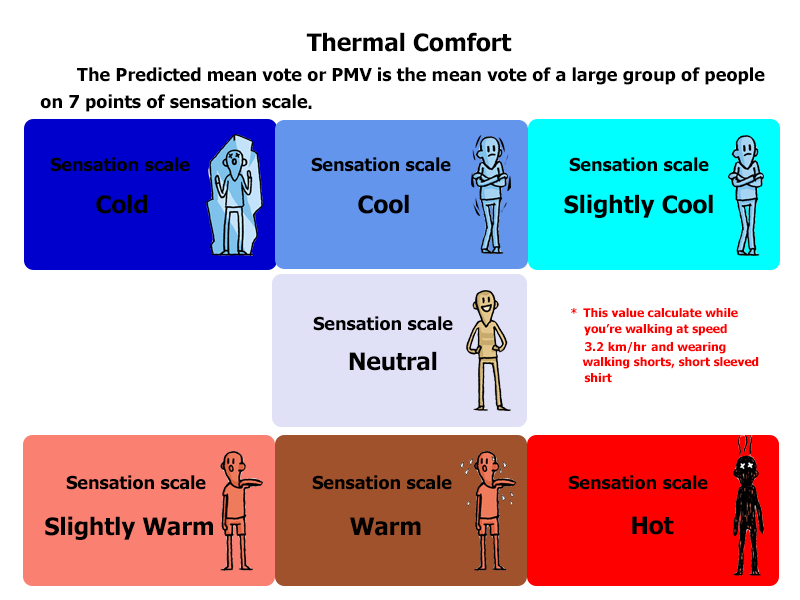
<style>
.page{position:relative;width:800px;height:600px;background:#ffffff}
.page>*{position:absolute;margin:0}
.t1{font:24px "Tahoma-Bold";color:#000000}
.t2{font:18px "Tahoma-Bold";color:#000000}
.t3{font:12px "Tahoma-Bold";color:#fe0000}
.t4{font:12px "Tahoma-Bold";color:#ff0000}
</style>
<div class="page">
<p class="t1" style="left:306px;top:32px;width:206px;height:20px">Thermal Comfort</p>
<p class="t2" style="left:77px;top:67px;width:688px;height:18px">The Predicted mean vote or PMV is the mean vote of a large group of people</p>
<p class="t2" style="left:40px;top:94px;width:268px;height:18px">on 7 points of sensation scale</p>
<p class="t2" style="left:308px;top:105px;width:4px;height:4px">.</p>
<p class="t2" style="left:50px;top:157px;width:140px;height:15px">Sensation scale</p>
<p class="t2" style="left:311px;top:157px;width:140px;height:15px">Sensation scale</p>
<p class="t2" style="left:569px;top:157px;width:140px;height:15px">Sensation scale</p>
<p class="t1" style="left:96px;top:194px;width:51px;height:20px">Cold</p>
<p class="t1" style="left:358px;top:194px;width:51px;height:20px">Cool</p>
<p class="t1" style="left:564px;top:194px;width:149px;height:24px">Slightly Cool</p>
<p class="t2" style="left:313px;top:316px;width:140px;height:15px">Sensation scale</p>
<p class="t3" style="left:571px;top:308px;width:6px;height:6px">*</p>
<p class="t4" style="left:583px;top:308px;width:155px;height:10px">This value calculate while</p>
<p class="t4" style="left:584px;top:324px;width:143px;height:12px">you’re walking at speed</p>
<p class="t4" style="left:585px;top:342px;width:19px;height:10px">3.2</p>
<p class="t4" style="left:608px;top:342px;width:39px;height:11px">km/hr</p>
<p class="t3" style="left:651px;top:342px;width:75px;height:12px">and wearing</p>
<p class="t1" style="left:349px;top:351px;width:88px;height:20px">Neutral</p>
<p class="t3" style="left:582px;top:357px;width:177px;height:12px">walking shorts, short sleeved</p>
<p class="t3" style="left:584px;top:373px;width:28px;height:10px">shirt</p>
<p class="t2" style="left:66px;top:475px;width:140px;height:15px">Sensation scale</p>
<p class="t2" style="left:312px;top:475px;width:140px;height:15px">Sensation scale</p>
<p class="t2" style="left:568px;top:475px;width:140px;height:15px">Sensation scale</p>
<p class="t1" style="left:45px;top:516px;width:168px;height:24px">Slightly Warm</p>
<p class="t1" style="left:350px;top:517px;width:71px;height:19px">Warm</p>
<p class="t1" style="left:632px;top:516px;width:42px;height:19px">Hot</p>
</div>
